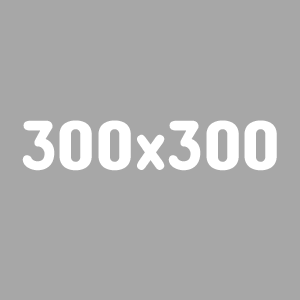
<style>
.page{position:relative;width:300px;height:300px;background:#a7a7a7}
.page>*{position:absolute;margin:0}
.t1{font:72px "ConcertOne-Regular";letter-spacing:-0.005em;color:#ffffff}
</style>
<div class="page">
<p class="t1" style="left:22px;top:120px;width:255px;height:51px">300x300</p>
</div>
